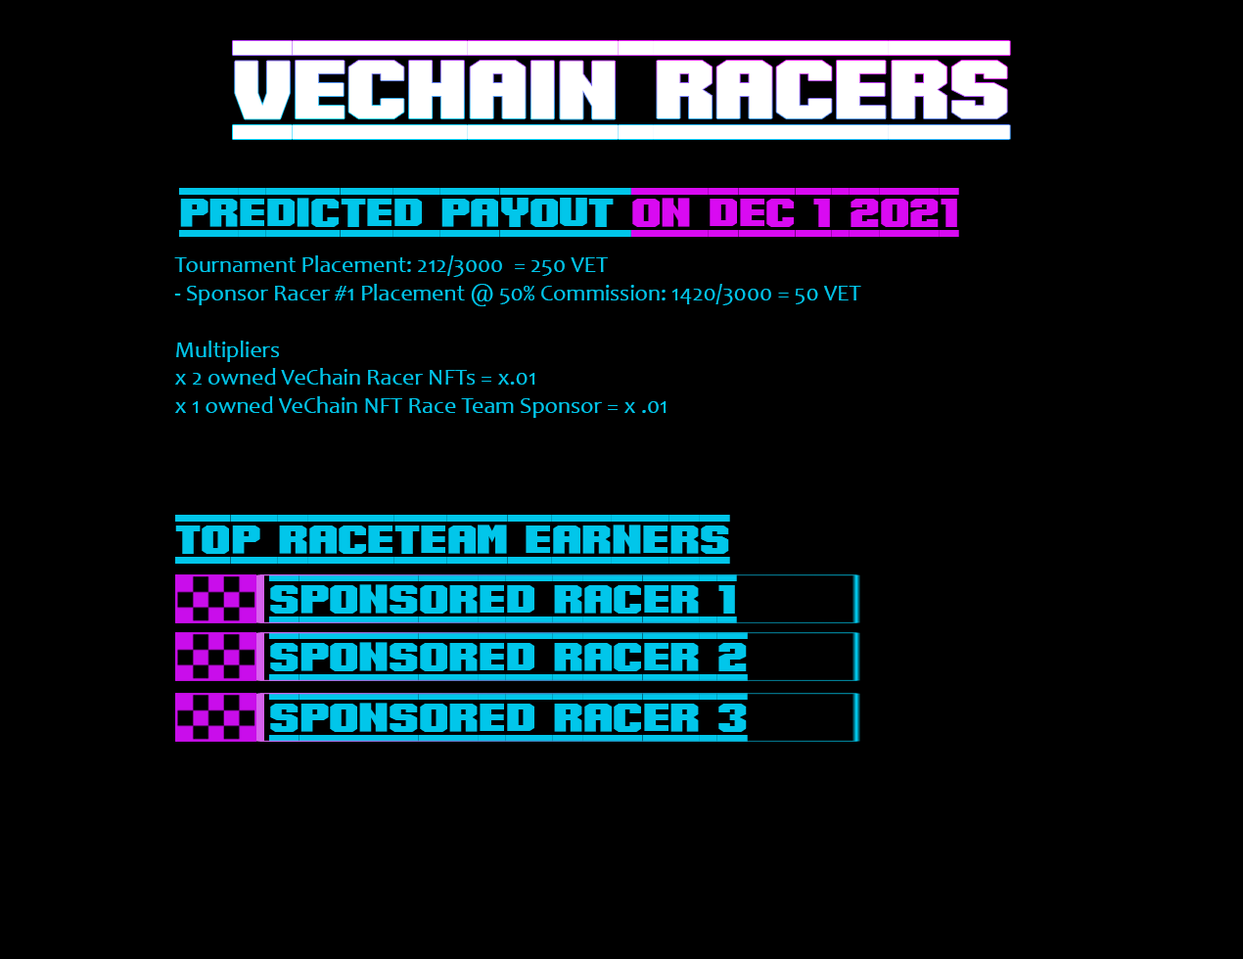
<style>
.page{position:relative;width:1243px;height:959px;background:#000000}
.page>*{position:absolute;margin:0}
.t1{font:141.9px "SpeedRacing-Regular";color:#ffffff}
.t2{font:70.5px "SpeedRacing-Regular";color:#01c6ea}
.t3{font:70.5px "SpeedRacing-Regular";color:#d90af2}
.t4{font:23.5px "Candara";color:#01c6ea}
</style>
<div class="page">
<p class="t1" style="left:233px;top:41px;width:777px;height:98px">VeChain Racers</p>
<p class="t2" style="left:179px;top:188px;width:780px;height:49px">PREDICTED PAYOUT <span class="t3">ON dec 1 2021</span></p>
<p class="t4" style="left:174px;top:255px;width:687px;height:163px">Tournament Placement: 212/3000  = 250 VET<br>- Sponsor Racer #1 Placement @ 50% Commission: 1420/3000 = 50 VET <br><br>Multipliers<br>x 2 owned VeChain Racer NFTs = x.01<br>x 1 owned VeChain NFT Race Team Sponsor = x .01</p>
<p class="t2" style="left:175px;top:515px;width:555px;height:49px">TOP RACETEAM EARNERS</p>
<p class="t2" style="left:269px;top:575px;width:468px;height:49px">SPONSORED RACER 1</p>
<p class="t2" style="left:269px;top:632px;width:479px;height:49px">SPONSORED RACER 2</p>
<p class="t2" style="left:269px;top:693px;width:479px;height:49px">SPONSORED RACER 3</p>
</div>
